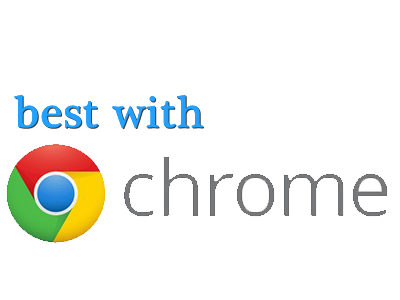
<style>
.page{position:relative;width:400px;height:300px;background:#ffffff}
.page>*{position:absolute;margin:0}
.t1{font:45.5px "PlantagenetCherokee";color:#24a0ff;font-weight:bold}
</style>
<div class="page">
<p class="t1" style="left:14px;top:95px;width:189px;height:33px">best with</p>
</div>
